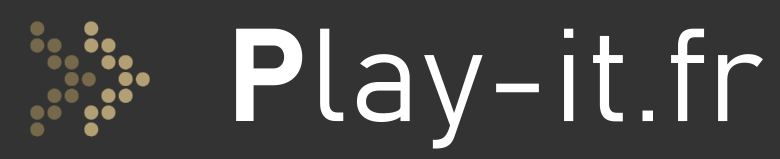
<style>
.page{position:relative;width:780px;height:159px;background:#333333}
.page>*{position:absolute;margin:0}
.t1{font:130px "Bahnschrift-Light";letter-spacing:0.024em;color:#ffffff}
.t2{font:130px "Bahnschrift-Bold";letter-spacing:0.024em;color:#ffffff}
</style>
<div class="page">
<p class="t1" style="left:236px;top:28px;width:527px;height:121px"><span class="t2">P</span>lay-it.fr</p>
</div>
